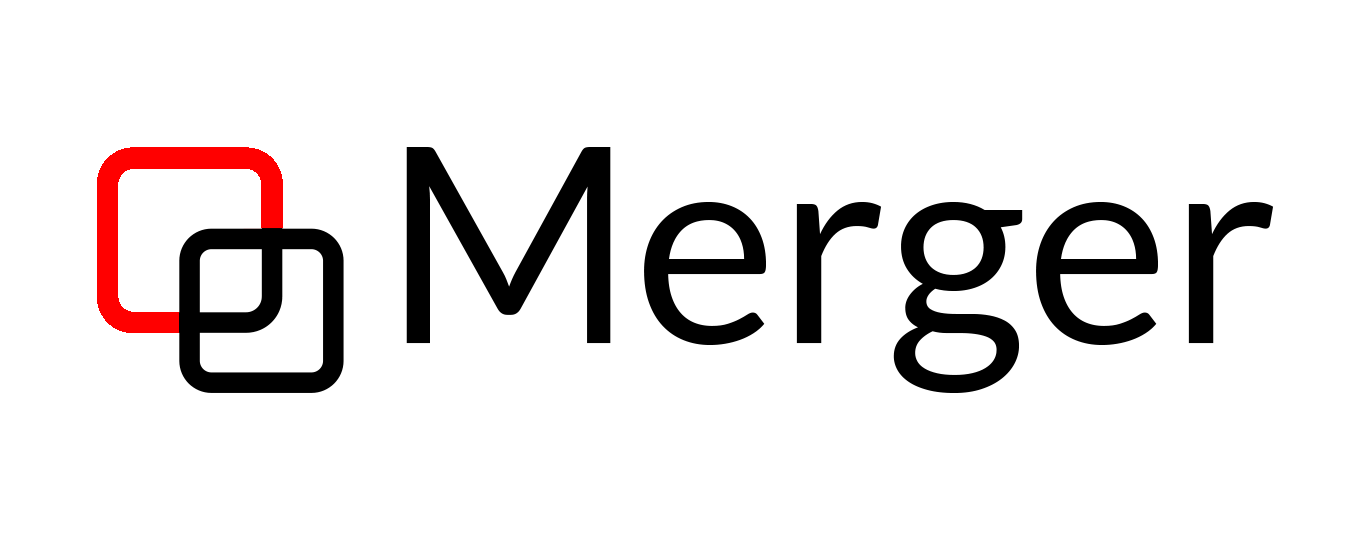
<style>
.page{position:relative;width:1370px;height:540px;background:#ffffff}
.page>*{position:absolute;margin:0}
.t1{font:272.7px "Lato-Regular";color:#000000}
</style>
<div class="page">
<p class="t1" style="left:406px;top:147px;width:868px;height:246px">Merger</p>
</div>
